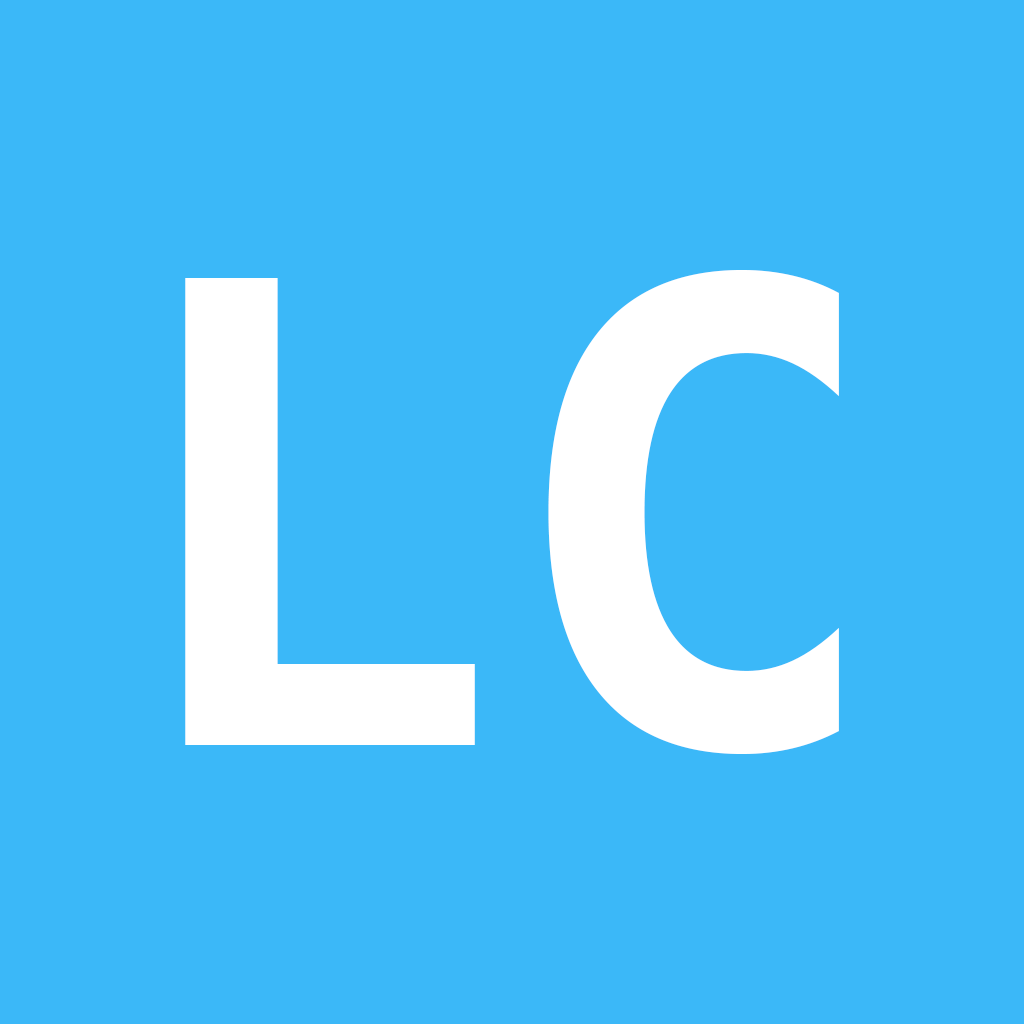
<style>
.page{position:relative;width:1024px;height:1024px;background:#3bb8f8}
.page>*{position:absolute;margin:0}
.t1{font:640px "Menlo-Bold";color:#ffffff}
</style>
<div class="page">
<p class="t1" style="left:185px;top:270px;width:654px;height:484px">LC</p>
</div>
